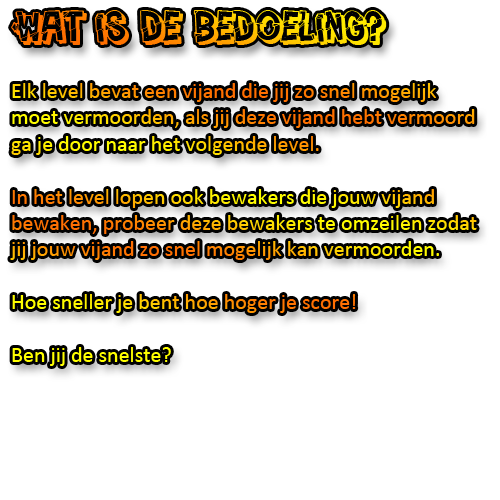
<style>
.page{position:relative;width:500px;height:500px;background:#ffffff}
.page>*{position:absolute;margin:0}
.t1{font:22px "Calibri"}
.t2{font:46.7px "PeintureFraiche"}
</style>
<div class="page">
<p class="t1" style="left:10px;top:10px;width:467px;height:356px"><span class="t2">Wat is de bedoeling?<br><br></span>Elk level bevat een vijand die jij zo snel mogelijk moet vermoorden, als jij deze vijand hebt vermoord ga je door naar het volgende level.<br><br>In het level lopen ook bewakers die jouw vijand bewaken, probeer deze bewakers te omzeilen zodat jij jouw vijand zo snel mogelijk kan vermoorden.<br><br>Hoe sneller je bent hoe hoger je score!<br><br>Ben jij de snelste?</p>
</div>
